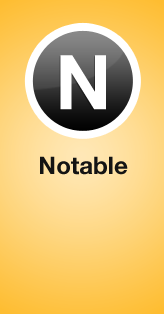
<style>
.page{position:relative;width:164px;height:314px}
.page>*{position:absolute;margin:0}
.t1{font:75.5px "HelveticaNeue-Bold";color:#ffffff}
.t2{font:24px "HelveticaNeue-Bold";color:#141414}
</style>
<div class="page">
<p class="t1" style="left:60px;top:55px;width:46px;height:55px">N</p>
<p class="t2" style="left:40px;top:156px;width:88px;height:19px">Notable</p>
</div>
